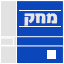
<style>
.page{position:relative;width:64px;height:64px;background:#0c46bb}
.page>*{position:absolute;margin:0}
.t1{font:19.9px "FbAlbatros-Black";color:#e6e6e6}
</style>
<div class="page">
<p class="t1" style="left:24px;top:12px;width:34px;height:14px;rotate:1deg">מחק</p>
</div>
